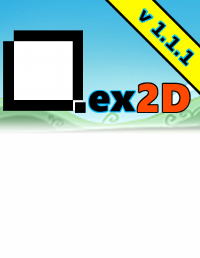
<style>
.page{position:relative;width:200px;height:258px;background:#fefefe}
.page>*{position:absolute;margin:0}
.t1{font:18.4px "BitstreamVeraSans-Bold";color:#010000}
.t2{font:39.9px "SegoeWP-Black";color:#ff4800}
.t3{font:39.9px "SegoeWP-Black";color:#000000}
</style>
<div class="page">
<p class="t1" style="left:139px;top:9px;width:55px;height:57px;rotate:45deg">v 1.1.1</p>
<p class="t2" style="left:137px;top:83px;width:53px;height:29px">2D</p>
<p class="t3" style="left:89px;top:90px;width:46px;height:22px">ex</p>
</div>
